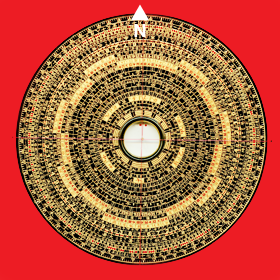
<style>
.page{position:relative;width:280px;height:280px;background:#ed1c24}
.page>*{position:absolute;margin:0}
.t1{font:18px "HelveticaNeue-Bold";letter-spacing:-0.01em;color:#ffffff}
</style>
<div class="page">
<p class="t1" style="left:134px;top:24px;width:12px;height:13px">N</p>
</div>
